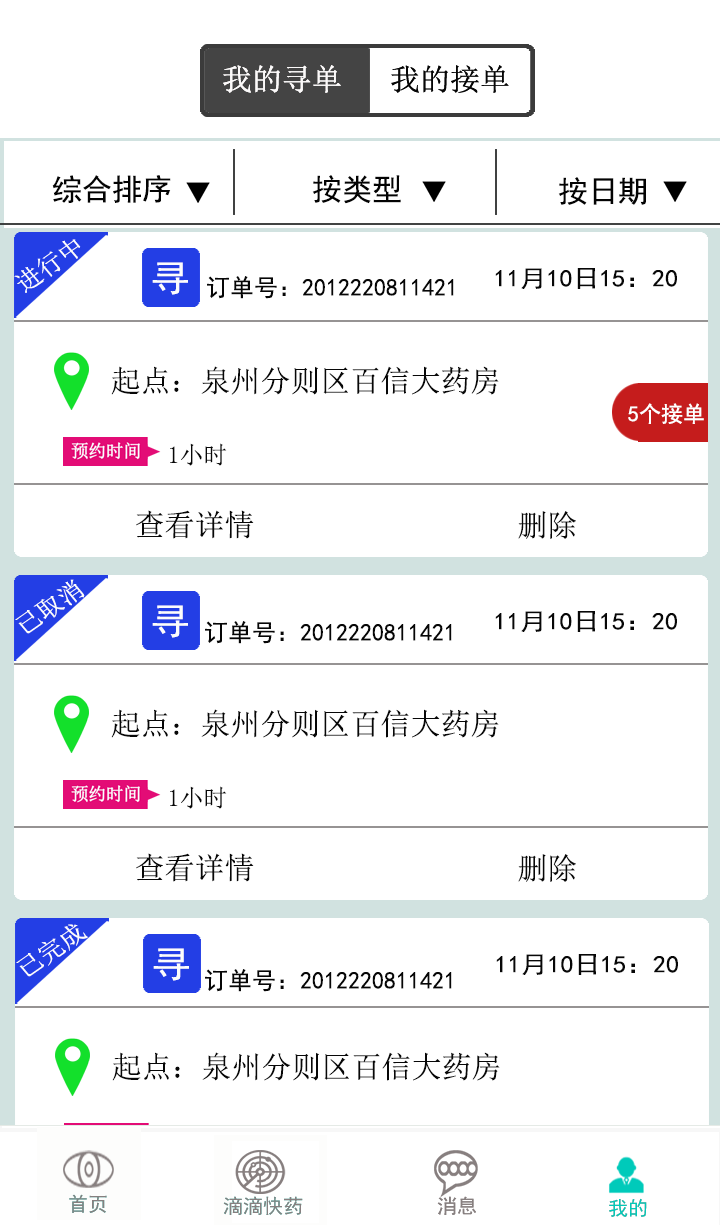
<style>
.page{position:relative;width:720px;height:1225px;background:#ffffff}
.page>*{position:absolute;margin:0}
.t1{font:30px "NSimSun";color:#fcfafa}
.t2{font:30px "NSimSun";color:#060606}
.t3{font:30px "SimHei";color:#030303}
.t4{font:24.9px "NSimSun";color:#fcfcfc}
.t5{font:36px "SimHei";color:#fcfcfc;scale:1.1 1}
.t6{font:24px "SimHei";color:#070707;scale:1.1 1}
.t7{font:24px "SimHei";color:#060606}
.t8{font:30px "NSimSun";color:#070707}
.t9{font:22px "SimHei";color:#ffffff}
.t10{font:24px "NSimSun";color:#070707}
</style>
<div class="page">
<p class="t1" style="left:223px;top:65px;width:118px;height:28px">我的寻单</p>
<p class="t1" style="left:223px;top:65px;width:118px;height:28px">我的寻单</p>
<p class="t2" style="left:391px;top:65px;width:118px;height:28px">我的接单</p>
<p class="t2" style="left:391px;top:65px;width:118px;height:28px">我的接单</p>
<p class="t3" style="left:52px;top:175px;width:119px;height:29px">综合排序</p>
<p class="t3" style="left:312px;top:175px;width:89px;height:29px">按类型</p>
<p class="t3" style="left:558px;top:177px;width:88px;height:28px">按日期</p>
<p class="t4" style="left:14px;top:239px;width:67px;height:54px;rotate:-35deg">进行中</p>
<p class="t5" style="left:152px;top:262px;width:36px;height:33px">寻</p>
<p class="t6" style="left:495px;top:268px;width:182px;height:21px">11月10日15：20</p>
<p class="t7" style="left:207px;top:276px;width:247px;height:23px">订单号：2012220811421</p>
<p class="t8" style="left:111px;top:366px;width:388px;height:29px">起点：泉州分则区百信大药房</p>
<p class="t9" style="left:628px;top:403px;width:76px;height:21px">5个接单</p>
<p class="t10" style="left:170px;top:443px;width:57px;height:23px">1小时</p>
<p class="t8" style="left:136px;top:510px;width:118px;height:29px">查看详情</p>
<p class="t8" style="left:518px;top:511px;width:58px;height:28px">删除</p>
<p class="t4" style="left:15px;top:579px;width:70px;height:55px;rotate:-35deg">已取消</p>
<p class="t5" style="left:152px;top:605px;width:36px;height:33px">寻</p>
<p class="t6" style="left:495px;top:611px;width:182px;height:21px">11月10日15：20</p>
<p class="t7" style="left:205px;top:621px;width:247px;height:23px">订单号：2012220811421</p>
<p class="t8" style="left:111px;top:709px;width:388px;height:29px">起点：泉州分则区百信大药房</p>
<p class="t10" style="left:170px;top:786px;width:57px;height:23px">1小时</p>
<p class="t8" style="left:136px;top:853px;width:118px;height:29px">查看详情</p>
<p class="t8" style="left:518px;top:854px;width:58px;height:28px">删除</p>
<p class="t4" style="left:16px;top:924px;width:72px;height:53px;rotate:-35deg">已完成</p>
<p class="t5" style="left:153px;top:948px;width:36px;height:33px">寻</p>
<p class="t6" style="left:496px;top:954px;width:182px;height:21px">11月10日15：20</p>
<p class="t7" style="left:205px;top:969px;width:247px;height:23px">订单号：2012220811421</p>
<p class="t8" style="left:112px;top:1052px;width:388px;height:29px">起点：泉州分则区百信大药房</p>
</div>
